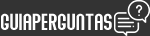
<style>
.page{position:relative;width:150px;height:36px;background:#333333}
.page>*{position:absolute;margin:0}
.t1{font:19.5px "Abraham";color:#ffffff;scale:1.1 1}
</style>
<div class="page">
<p class="t1" style="left:1px;top:13px;width:111px;height:17px">guiaPerguntas</p>
</div>
